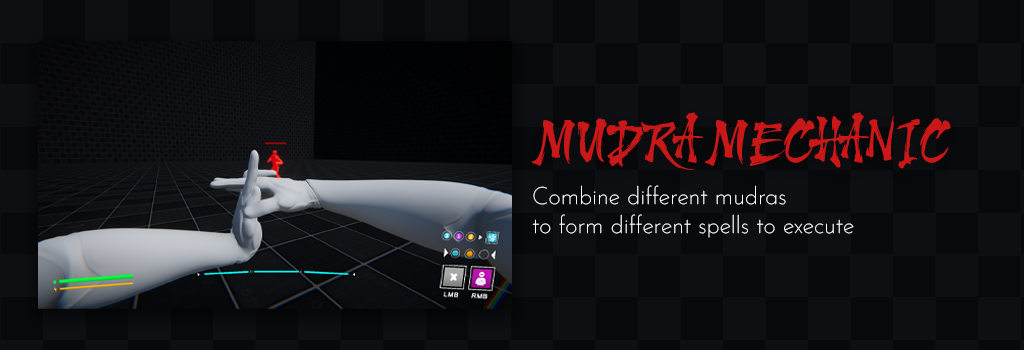
<style>
.page{position:relative;width:1024px;height:350px;background:#0d0f12}
.page>*{position:absolute;margin:0}
.t1{font:60px "Harukaze-Demo";letter-spacing:0.025em;color:#ca1818}
.t2{font:24px "JosefinSans-Thin";color:#ffffff}
</style>
<div class="page">
<p class="t1" style="left:532px;top:112px;width:419px;height:58px">MUDRA MECHANIC</p>
<p class="t2" style="left:532px;top:185px;width:322px;height:53px">Combine different mudras<br>to form different spells to execute</p>
</div>
